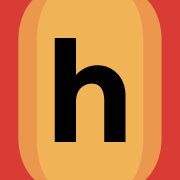
<style>
.page{position:relative;width:180px;height:180px;background:#f0b356}
.page>*{position:absolute;margin:0}
.t1{font:140px "Montserrat-Bold";color:#000000}
</style>
<div class="page">
<p class="t1" style="left:54px;top:38px;width:72px;height:104px">h</p>
</div>
